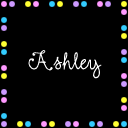
<style>
.page{position:relative;width:128px;height:128px;background:#000000}
.page>*{position:absolute;margin:0}
.t1{font:18px "DJFancy";color:#ffffff}
</style>
<div class="page">
<p class="t1" style="left:28px;top:50px;width:74px;height:29px">Ashley</p>
</div>
